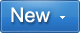
<style>
.page{position:relative;width:80px;height:33px}
.page>*{position:absolute;margin:0}
.t1{font:20px "ArialMT";color:#ffffff}
</style>
<div class="page">
<p class="t1" style="left:11px;top:7px;width:39px;height:16px">New</p>
</div>
